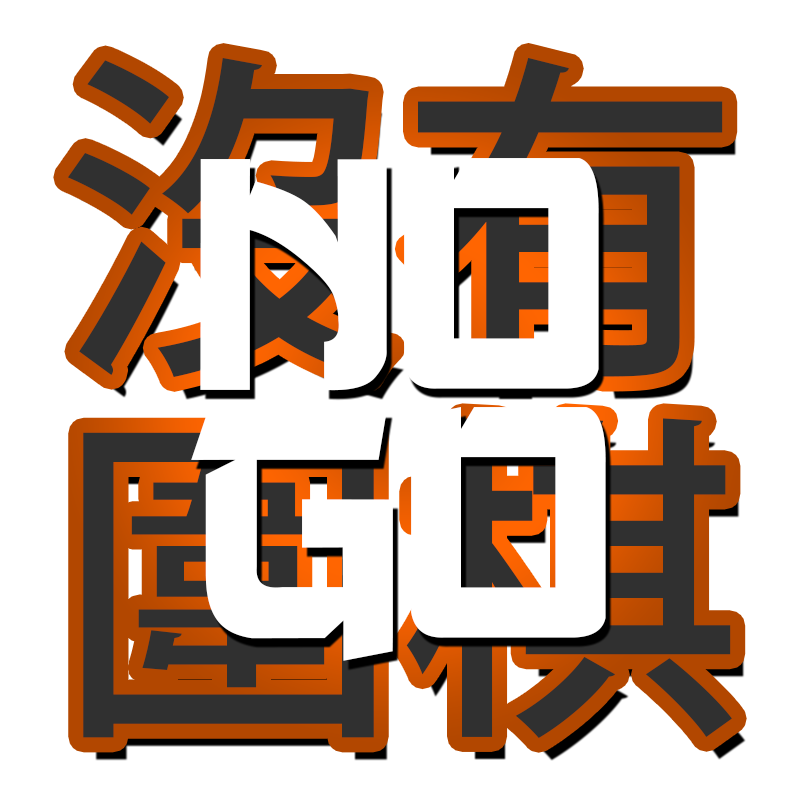
<style>
.page{position:relative;width:800px;height:800px;background:#ffffff}
.page>*{position:absolute;margin:0}
.t1{font:340.3px/360px "KozGoPr6N-Medium";color:#303030}
.t2{font:347.3px/249.8px "GangofThree";color:#ffffff}
</style>
<div class="page">
<p class="t1" style="left:68px;top:57px;width:664px;height:681px;text-align:center">沒有<br>圍棋</p>
<p class="t2" style="left:191px;top:158px;width:415px;height:503px;text-align:center">NO<br>GO</p>
</div>
